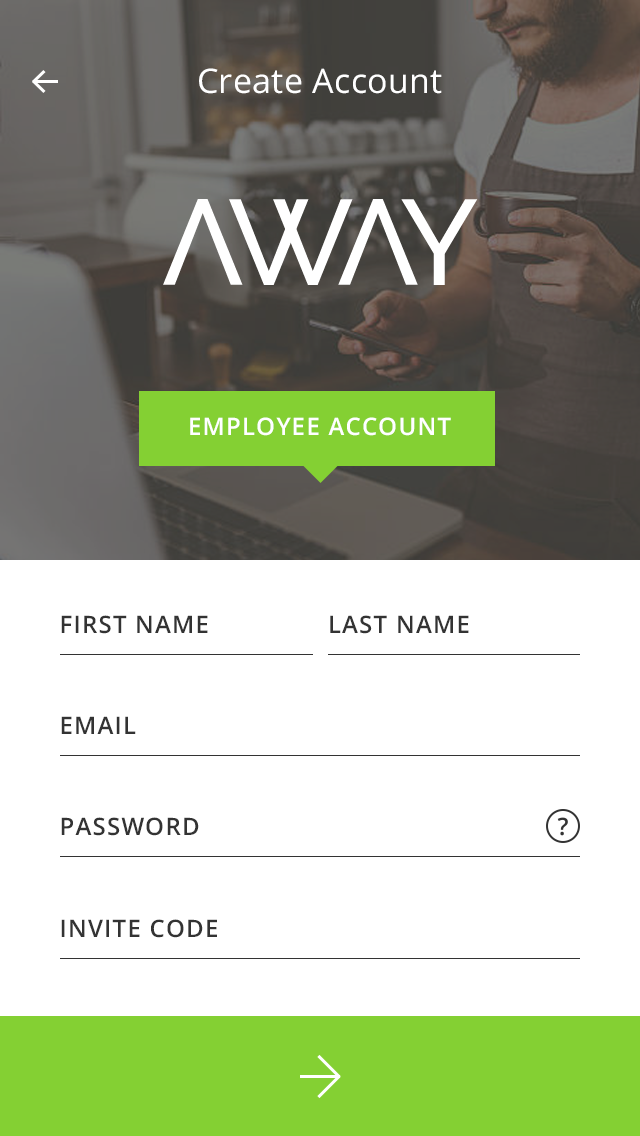
<style>
.page{position:relative;width:640px;height:1136px;background:#ffffff}
.page>*{position:absolute;margin:0}
.t1{font:34px "OpenSans";letter-spacing:0.01em;color:#ffffff}
.t2{font:24px "OpenSans-Semibold";letter-spacing:0.05em;color:#ffffff;text-transform:uppercase}
.t3{font:24px "OpenSans-Semibold";letter-spacing:0.05em;color:#333333;text-transform:uppercase}
</style>
<div class="page">
<p class="t1" style="left:199px;top:68px;width:243px;height:26px">Create Account</p>
<p class="t2" style="left:190px;top:417px;width:261px;height:19px">EMPLOYEE ACCOUNT</p>
<p class="t3" style="left:61px;top:615px;width:147px;height:19px">First NAME</p>
<p class="t3" style="left:330px;top:615px;width:139px;height:19px">LAST NAME</p>
<p class="t3" style="left:61px;top:716px;width:75px;height:18px">email</p>
<p class="t3" style="left:61px;top:817px;width:138px;height:19px">password</p>
<p class="t3" style="left:61px;top:919px;width:156px;height:19px">INVITE CODE</p>
</div>
